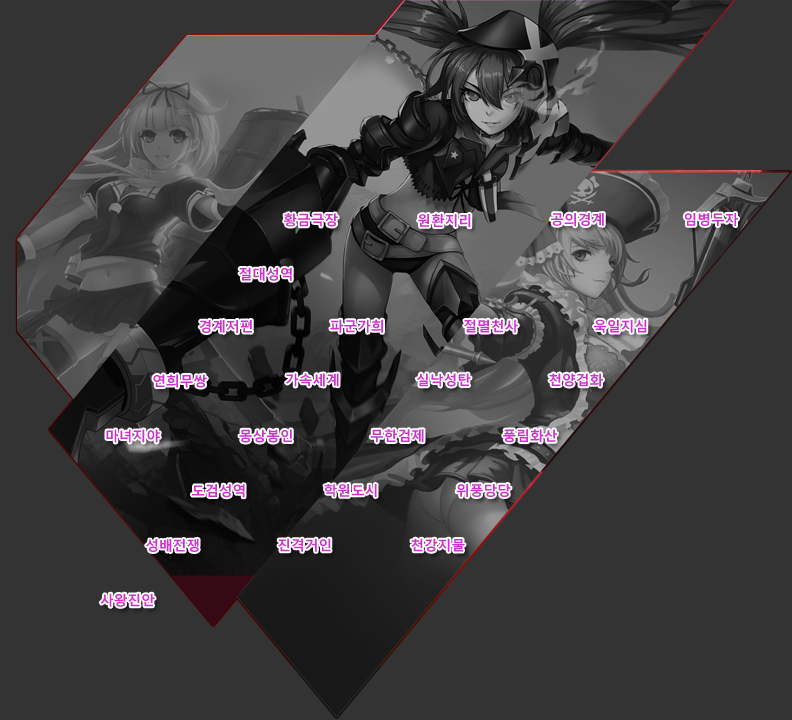
<style>
.page{position:relative;width:792px;height:720px;background:#333333}
.page>*{position:absolute;margin:0}
.t1{font:13.7px "MalgunGothicBold";color:#cc33cc}
</style>
<div class="page">
<p class="t1" style="left:284px;top:213px;width:54px;height:14px">황금극장</p>
<p class="t1" style="left:418px;top:213px;width:53px;height:15px">원환지리</p>
<p class="t1" style="left:551px;top:213px;width:53px;height:14px">공의경계</p>
<p class="t1" style="left:684px;top:213px;width:54px;height:13px">임병두자</p>
<p class="t1" style="left:239px;top:267px;width:53px;height:14px">절대성역</p>
<p class="t1" style="left:199px;top:320px;width:53px;height:13px">경계저편</p>
<p class="t1" style="left:330px;top:319px;width:53px;height:14px">파군가희</p>
<p class="t1" style="left:464px;top:319px;width:54px;height:14px">절멸천사</p>
<p class="t1" style="left:594px;top:319px;width:53px;height:14px">욱일지심</p>
<p class="t1" style="left:153px;top:374px;width:54px;height:14px">연희무쌍</p>
<p class="t1" style="left:286px;top:373px;width:53px;height:14px">가속세계</p>
<p class="t1" style="left:416px;top:373px;width:55px;height:14px">실낙성탄</p>
<p class="t1" style="left:549px;top:373px;width:54px;height:14px">천양겁화</p>
<p class="t1" style="left:106px;top:429px;width:54px;height:14px">마녀지야</p>
<p class="t1" style="left:239px;top:429px;width:53px;height:14px">몽상봉인</p>
<p class="t1" style="left:370px;top:429px;width:54px;height:14px">무한검제</p>
<p class="t1" style="left:503px;top:429px;width:54px;height:14px">풍림화산</p>
<p class="t1" style="left:192px;top:484px;width:53px;height:14px">도검성역</p>
<p class="t1" style="left:324px;top:484px;width:53px;height:13px">학원도시</p>
<p class="t1" style="left:456px;top:484px;width:55px;height:13px">위풍당당</p>
<p class="t1" style="left:146px;top:539px;width:53px;height:13px">성배전쟁</p>
<p class="t1" style="left:278px;top:538px;width:53px;height:14px">진격거인</p>
<p class="t1" style="left:411px;top:538px;width:54px;height:14px">천강지물</p>
<p class="t1" style="left:100px;top:593px;width:55px;height:14px">사왕진안</p>
</div>
